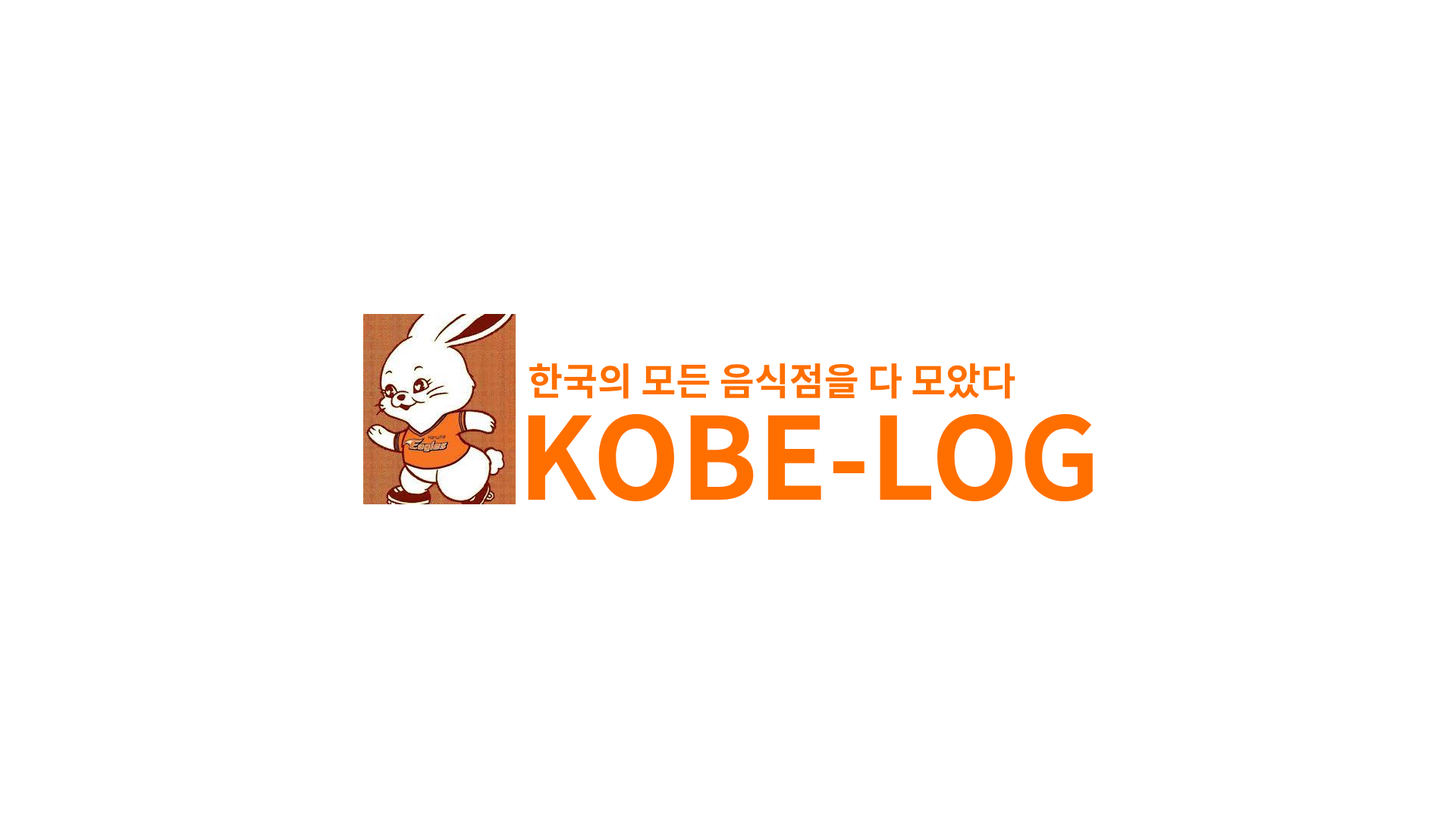
<style>
.page{position:relative;width:1456px;height:819px;background:#ffffff}
.page>*{position:absolute;margin:0}
.t1{font:37.9px "NotoSansKR-Bold";color:#ff6f00}
.t2{font:113.7px "NotoSansKR-Bold";color:#ff6f00}
</style>
<div class="page">
<p class="t1" style="left:529px;top:363px;width:486px;height:36px">한국의 모든 음식점을 다 모았다 모아봤어ㅁ</p>
<p class="t2" style="left:528px;top:413px;width:565px;height:89px">KOBE-LOG</p>
</div>
